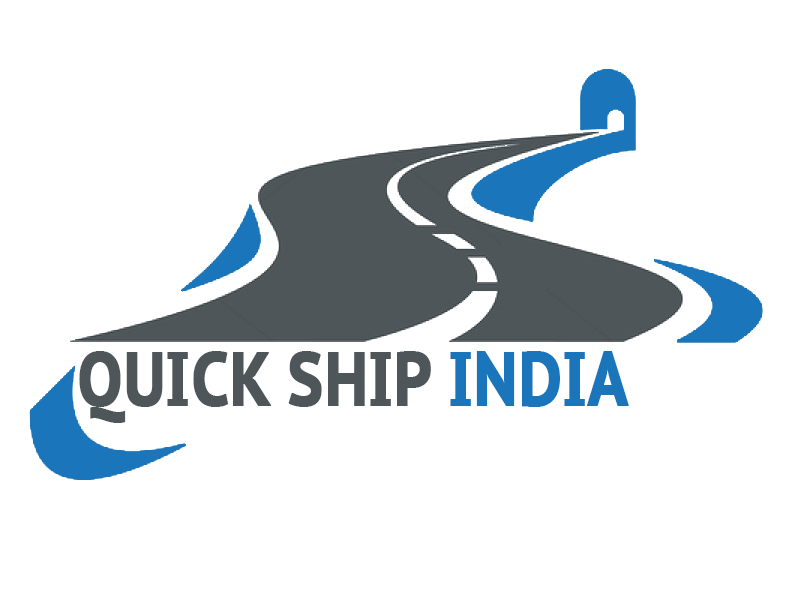
<style>
.page{position:relative;width:800px;height:600px;background:#ffffff}
.page>*{position:absolute;margin:0}
.t1{font:76px "PTSans-CaptionBold";color:#4e5659;text-transform:uppercase;font-weight:bold;scale:0.8 1}
.t2{font:76px "PTSans-CaptionBold";color:#1a75bb;text-transform:uppercase;font-weight:bold;scale:0.8 1}
</style>
<div class="page">
<p class="t1" style="left:79px;top:351px;width:550px;height:72px">Quick Ship <span class="t2">India</span></p>
</div>
